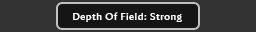
<style>
.page{position:relative;width:256px;height:32px;background:#333333}
.page>*{position:absolute;margin:0}
.t1{font:10px "AmiraParadiso";letter-spacing:0.05em;color:#ffffff}
</style>
<div class="page">
<p class="t1" style="left:73px;top:12px;width:109px;height:10px">Depth Of Field: Strong</p>
</div>
